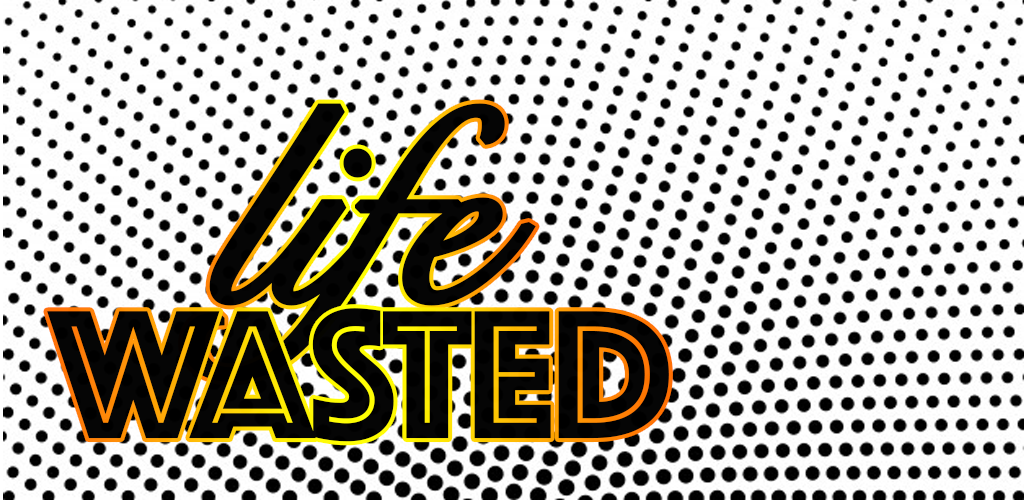
<style>
.page{position:relative;width:1024px;height:500px;background:#ffffff}
.page>*{position:absolute;margin:0}
.t1{font:270.6px "SnellRoundhand";letter-spacing:-0.02em;color:#000000;font-weight:bold}
.t2{font:189.7px "Phosphate-Inline";letter-spacing:-0.02em;color:#000000}
</style>
<div class="page">
<p class="t1" style="left:182px;top:103px;width:354px;height:279px">life</p>
<p class="t2" style="left:47px;top:308px;width:622px;height:134px">WASTED</p>
</div>
